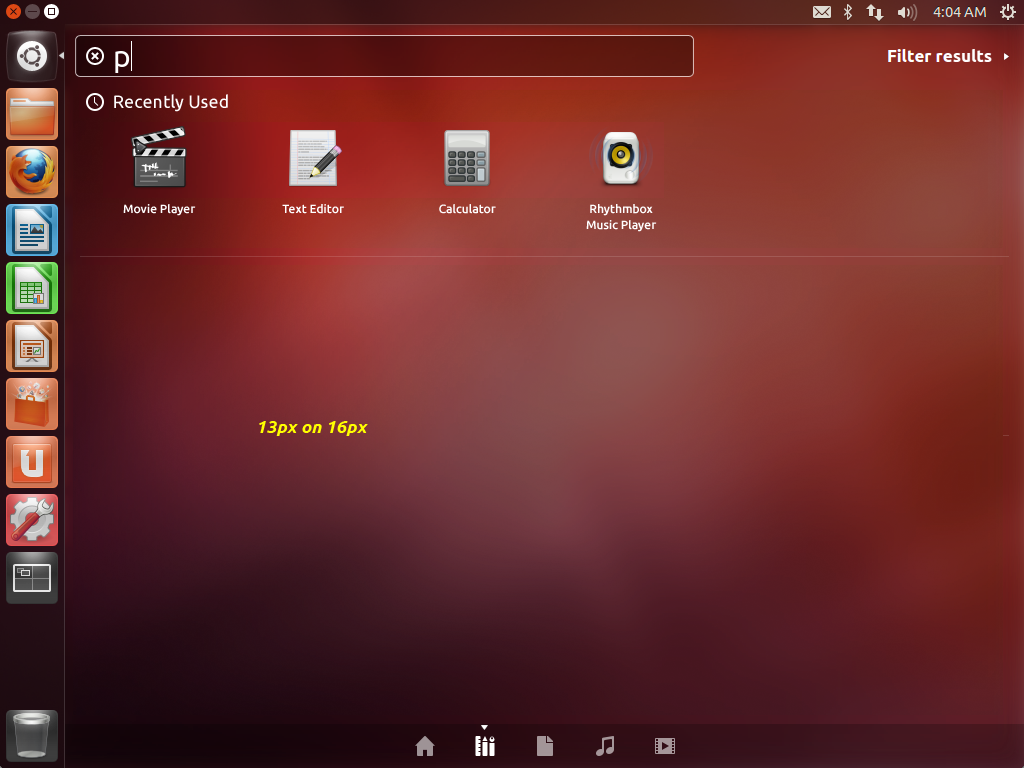
<style>
.page{position:relative;width:1024px;height:768px}
.page>*{position:absolute;margin:0}
.t1{font:18px "Ubuntu";color:#ffffff}
.t2{font:12px "Ubuntu-Medium";color:#ffffff}
.t3{font:12px/16px "Ubuntu-Medium";color:#ffffff}
.t4{font:18px "Ubuntu-BoldItalic";color:#ffff00}
</style>
<div class="page">
<p class="t1" style="left:114px;top:94px;width:114px;height:18px">Recently Used</p>
<p class="t2" style="left:123px;top:204px;width:73px;height:12px">Movie Player</p>
<p class="t2" style="left:282px;top:204px;width:62px;height:10px">Text Editor</p>
<p class="t2" style="left:439px;top:204px;width:57px;height:10px">Calculator</p>
<p class="t3" style="left:586px;top:204px;width:71px;height:28px;text-align:center">Rhythmbox<br>Music Player</p>
<p class="t4" style="left:259px;top:421px;width:109px;height:15px">13px on 16px</p>
</div>
